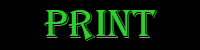
<style>
.page{position:relative;width:200px;height:50px;background:#000000}
.page>*{position:absolute;margin:0}
.t1{font:41.7px "Algerian";color:#33cc33}
</style>
<div class="page">
<p class="t1" style="left:44px;top:10px;width:113px;height:31px">Print</p>
</div>
